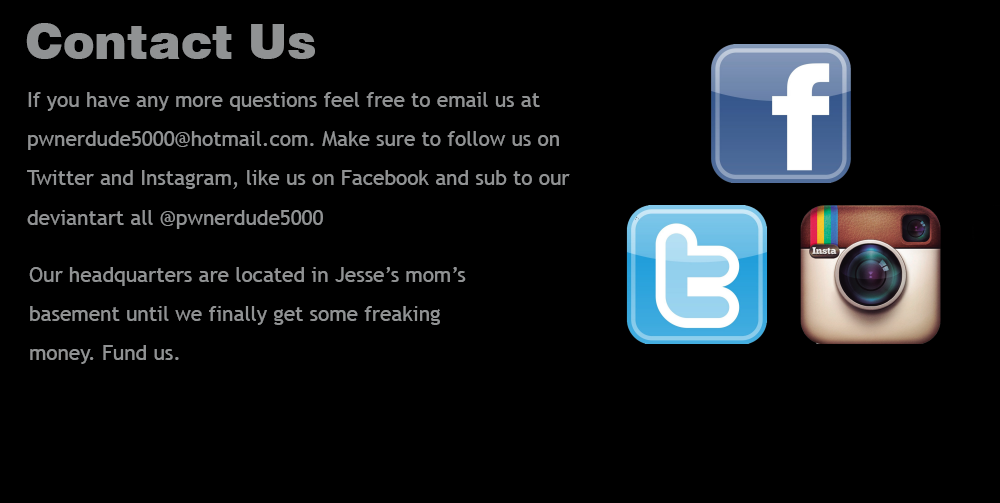
<style>
.page{position:relative;width:1000px;height:503px;background:#000000}
.page>*{position:absolute;margin:0}
.t1{font:48px "Swiss721BT-Black";color:#909293}
.t2{font:20.8px/39.2px "TrebuchetMS";color:#909293}
</style>
<div class="page">
<p class="t1" style="left:26px;top:23px;width:289px;height:36px">Contact Us</p>
<p class="t2" style="left:27px;top:92px;width:543px;height:137px">If you have any more questions feel free to email us at <br>pwnerdude5000@hotmail.com. Make sure to follow us on <br>Twitter and Instagram, like us on Facebook and sub to our <br>deviantart all @pwnerdude5000</p>
<p class="t2" style="left:29px;top:267px;width:437px;height:97px">Our headquarters are located in Jesse’s mom’s <br>basement until we finally get some freaking<br>money. Fund us.</p>
</div>
